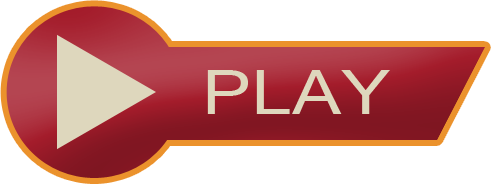
<style>
.page{position:relative;width:496px;height:185px;background:#ffffff}
.page>*{position:absolute;margin:0}
.t1{font:66.8px "Shruti";color:#ded7bd;scale:1.19 1}
</style>
<div class="page">
<p class="t1" style="left:207px;top:70px;width:183px;height:44px">PLAY</p>
</div>
